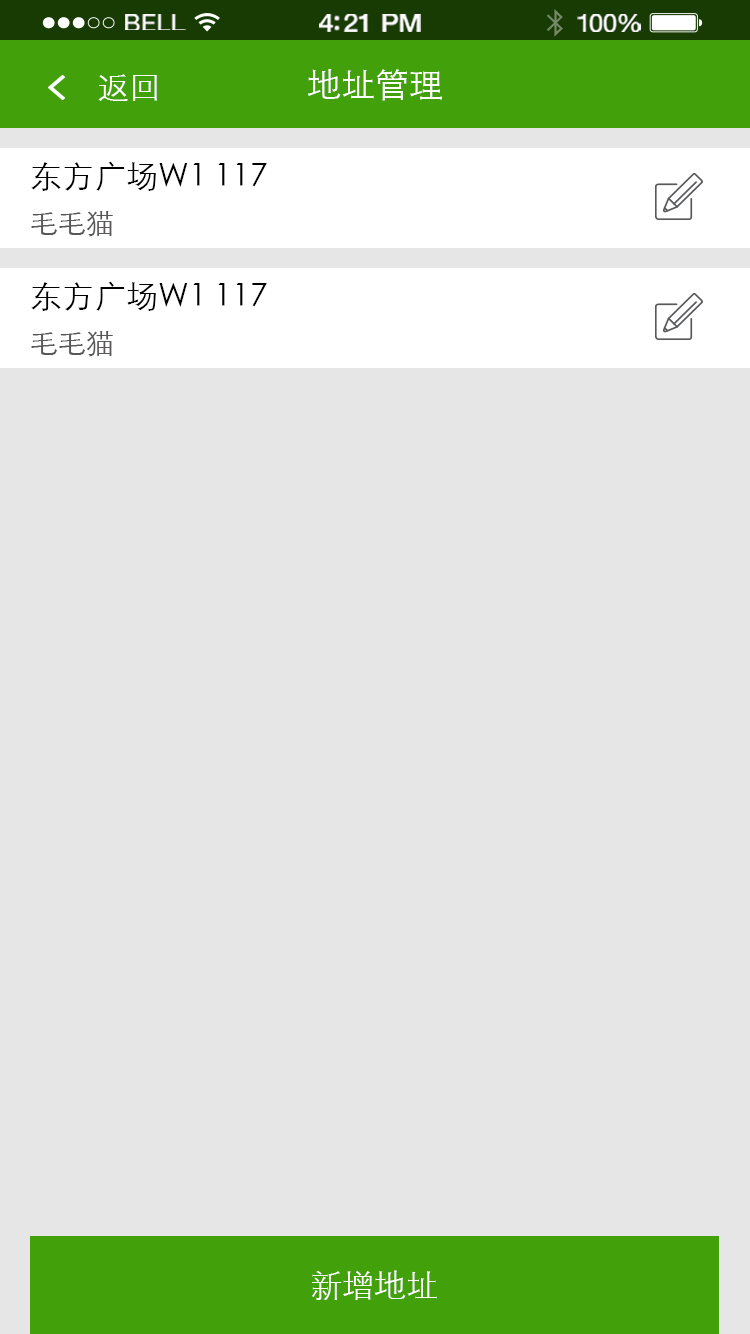
<style>
.page{position:relative;width:750px;height:1334px;background:#e6e6e6}
.page>*{position:absolute;margin:0}
.t1{font:23.3px "HelveticaNeue";letter-spacing:0.02em;color:#ffffff;scale:1.06 1}
.t2{font:25.3px "HelveticaNeue-Medium";letter-spacing:-0.02em;color:#ffffff;scale:1.06 1}
.t3{font:24.3px "HelveticaNeue";letter-spacing:-0.02em;color:#ffffff;scale:1.06 1}
.t4{font:32px "STXihei";color:#ffffff}
.t5{font:34px "STXihei";color:#ffffff}
.t6{font:32px "STXihei";color:#000000}
.t7{font:28px "STXihei";color:#595757}
.t8{font:32px "STXihei";color:#fffefe}
</style>
<div class="page">
<p class="t1" style="left:125px;top:14px;width:61px;height:16px">BELL</p>
<p class="t2" style="left:319px;top:14px;width:102px;height:18px">4:21 PM</p>
<p class="t3" style="left:577px;top:14px;width:64px;height:18px">100%</p>
<p class="t4" style="left:98px;top:74px;width:59px;height:27px">返回</p>
<p class="t5" style="left:307px;top:69px;width:135px;height:32px">地址管理</p>
<p class="t6" style="left:31px;top:161px;width:236px;height:30px">东方广场W1 117</p>
<p class="t7" style="left:31px;top:211px;width:82px;height:26px">毛毛猫</p>
<p class="t6" style="left:31px;top:281px;width:236px;height:30px">东方广场W1 117</p>
<p class="t7" style="left:31px;top:331px;width:82px;height:26px">毛毛猫</p>
<p class="t8" style="left:312px;top:1270px;width:125px;height:30px">新增地址</p>
</div>
